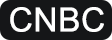
<style>
.page{position:relative;width:112px;height:40px;background:#151618}
.page>*{position:absolute;margin:0}
.t1{font:33.4px "ArialMT";letter-spacing:0.018em;color:#ffffff}
</style>
<div class="page">
<p class="t1" style="left:10px;top:7px;width:94px;height:25px">CNBC</p>
</div>
